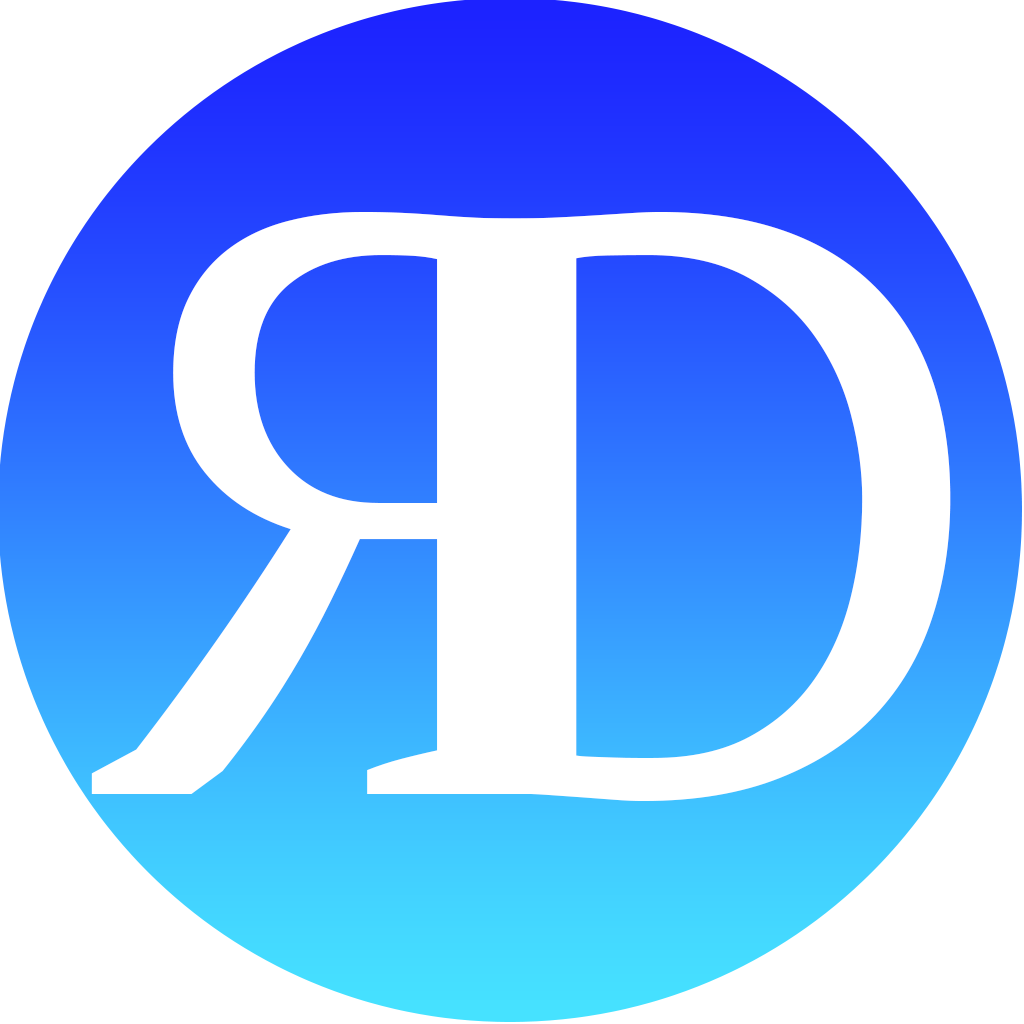
<style>
.page{position:relative;width:1024px;height:1024px;background:#ffffff}
.page>*{position:absolute;margin:0}
.t1{font:822px "PTSerif-Regular";color:#ffffff}
</style>
<div class="page">
<p class="t1" style="left:91px;top:212px;width:493px;height:582px;rotate:180deg">R</p>
<p class="t1" style="left:434px;top:212px;width:517px;height:589px">D</p>
</div>
